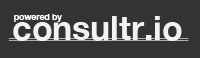
<style>
.page{position:relative;width:200px;height:58px;background:#333333}
.page>*{position:absolute;margin:0}
.t1{font:33.7px "HelveticaNeue-Bold";color:#f2f2f2}
.t2{font:8.5px "HelveticaNeue-Bold";color:#ffffff}
</style>
<div class="page">
<p class="t1" style="left:13px;top:16px;width:169px;height:25px">consultr.io</p>
<p class="t2" style="left:14px;top:14px;width:49px;height:8px">powered by</p>
</div>
